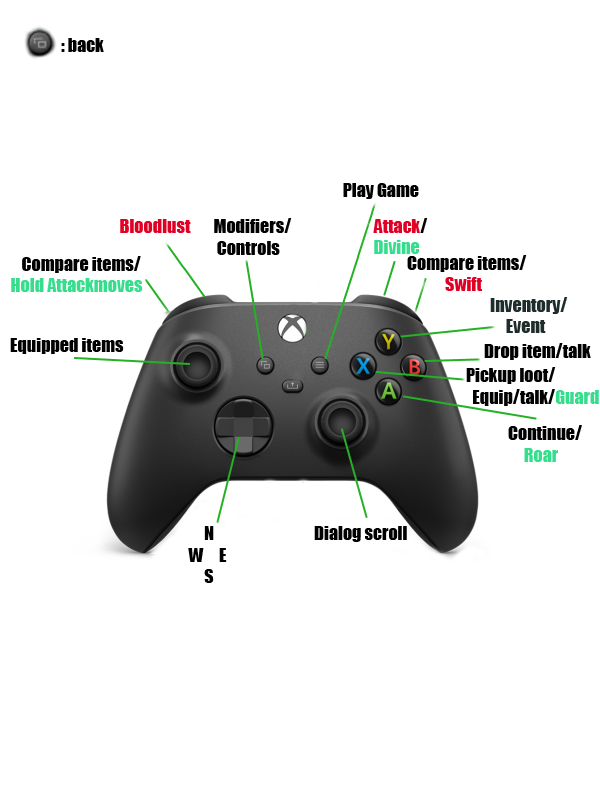
<style>
.page{position:relative;width:600px;height:800px;background:#ffffff}
.page>*{position:absolute;margin:0}
.t1{font:18px "Impact";color:#010101}
.t2{font:18px "Impact";color:#df0024}
.t3{font:18px "Impact";color:#000000}
.t4{font:18px "Impact";color:#36dd8c}
.t5{font:18px "Impact";color:#1f2c2c}
</style>
<div class="page">
<p class="t1" style="left:61px;top:38px;width:43px;height:14px">: back</p>
<p class="t1" style="left:343px;top:183px;width:76px;height:16px">Play Game</p>
<p class="t2" style="left:120px;top:219px;width:71px;height:14px">Bloodlust</p>
<p class="t1" style="left:214px;top:218px;width:78px;height:37px">Modifiers/<br> Controls</p>
<p class="t2" style="left:373px;top:218px;width:55px;height:36px">Attack<span class="t3">/<br></span><span class="t4">Divine</span></p>
<p class="t1" style="left:22px;top:256px;width:119px;height:17px">Compare items/</p>
<p class="t1" style="left:407px;top:255px;width:120px;height:36px">Compare items/<br>            <span class="t2">Swift</span></p>
<p class="t4" style="left:11px;top:278px;width:132px;height:14px">Hold Attackmoves</p>
<p class="t5" style="left:490px;top:297px;width:78px;height:36px">Inventory/<br>     Event</p>
<p class="t3" style="left:10px;top:338px;width:114px;height:16px">Equipped items</p>
<p class="t3" style="left:484px;top:343px;width:107px;height:17px">Drop item/talk</p>
<p class="t1" style="left:466px;top:367px;width:133px;height:39px">Pickup loot/<br>  Equip/talk/<span class="t4">Guard</span></p>
<p class="t3" style="left:508px;top:425px;width:74px;height:37px">Continue/<br>     <span class="t4">Roar</span></p>
<p class="t3" style="left:188px;top:526px;width:39px;height:57px">N<br>W     E<br>     S</p>
<p class="t3" style="left:314px;top:526px;width:93px;height:16px">Dialog scroll</p>
</div>
